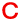
<style>
.page{position:relative;width:20px;height:20px;background:#ffffff}
.page>*{position:absolute;margin:0}
.t1{font:24px "MS-Gothic";color:#f00000}
</style>
<div class="page">
<p class="t1" style="left:2px;top:2px;width:16px;height:17px">Ｃ</p>
</div>
